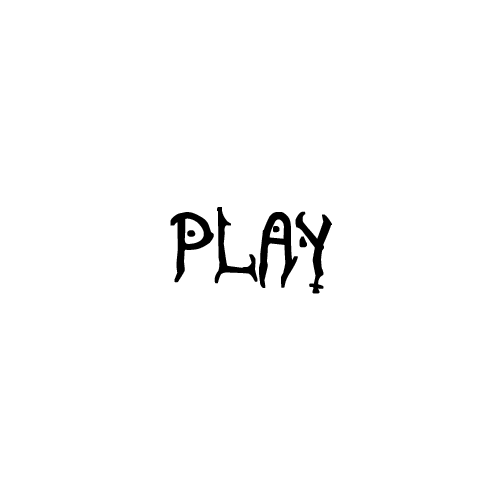
<style>
.page{position:relative;width:500px;height:500px;background:#ffffff}
.page>*{position:absolute;margin:0}
.t1{font:72px "SatanycDemoniacSt";color:#000000;font-weight:bold}
</style>
<div class="page">
<p class="t1" style="left:170px;top:207px;width:162px;height:87px">PLAY</p>
</div>
